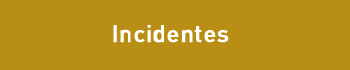
<style>
.page{position:relative;width:350px;height:70px;background:#b88e15}
.page>*{position:absolute;margin:0}
.t1{font:24px "DINPro-Medium";color:#ffffff;font-weight:bold}
</style>
<div class="page">
<p class="t1" style="left:113px;top:25px;width:116px;height:18px">Incidentes</p>
</div>
